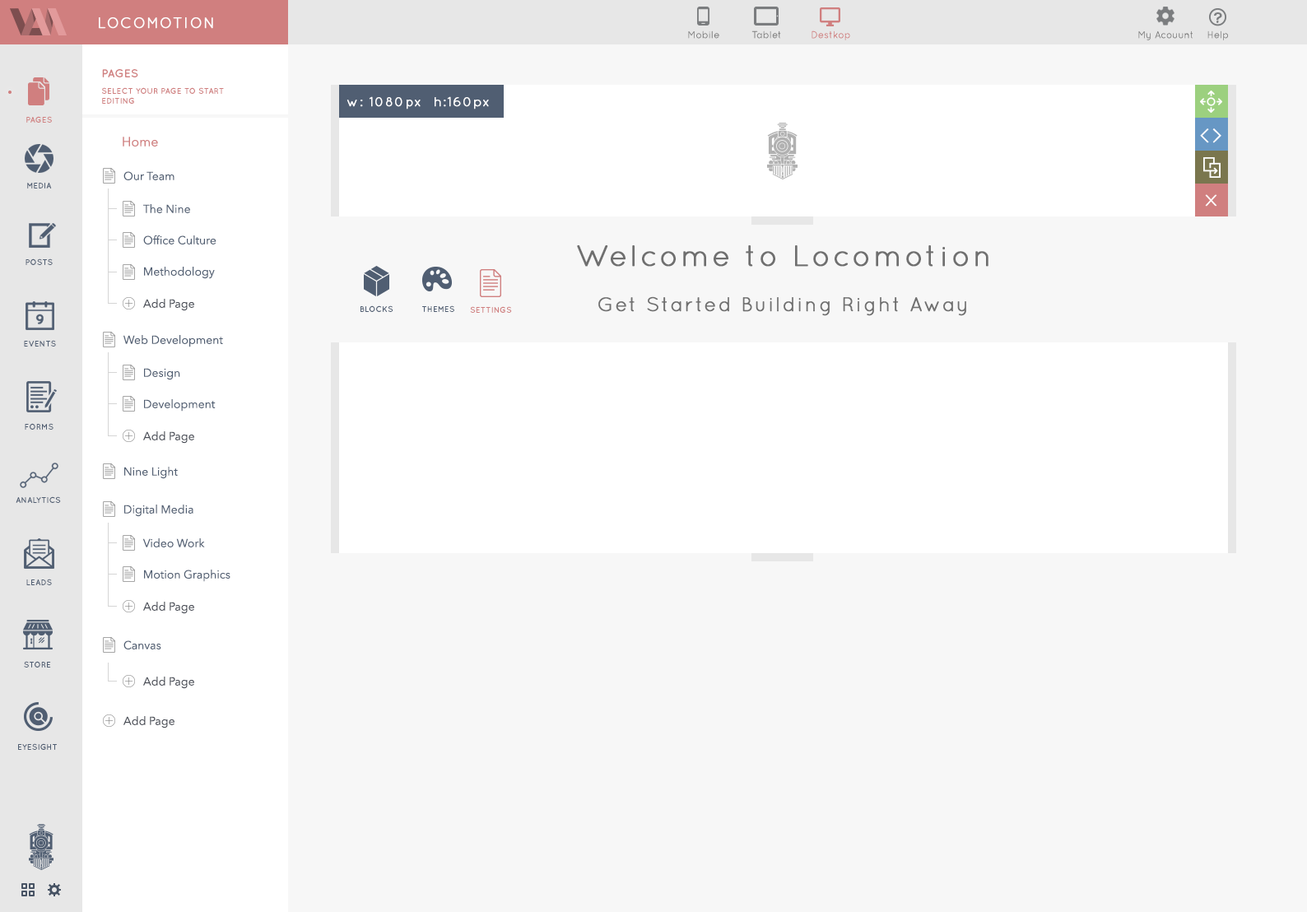
<style>
.page{position:relative;width:1307px;height:912px;background:#f7f7f7}
.page>*{position:absolute;margin:0}
.t1{font:14.8px "Quicksand-Regular";letter-spacing:0.07em;color:#ffffff;font-weight:bold}
.t2{font:9.9px "Quicksand-Regular";color:#797979}
.t3{font:9.9px "Quicksand-Regular";color:#d07f7f}
.t4{font:11.5px "Quicksand-Bold";color:#d07f7f;text-transform:uppercase}
.t5{font:8.2px/9.9px "Quicksand-Bold";color:#d07f7f;text-transform:uppercase}
.t6{font:13px "Quicksand-Regular";letter-spacing:0.07em;color:#ffffff;font-weight:bold}
.t7{font:8.2px "Quicksand-Bold";color:#d07f7f;text-transform:uppercase}
.t8{font:13.2px "AvenirNext-Regular";color:#d07f7f}
.t9{font:18.5px "EuphemiaUCAS";letter-spacing:0.12em;color:#ffffff;text-transform:uppercase;scale:1.12 1}
.t10{font:11.5px "AvenirNext-Regular";color:#505e72}
.t11{font:8.2px "Quicksand-Bold";color:#505e72;text-transform:uppercase}
.t12{font:15.6px "Quicksand-Regular";letter-spacing:0.07em;color:#ffffff;font-weight:bold;scale:1.27 1}
.t13{font:29.6px "Quicksand-Regular";letter-spacing:0.07em;color:#6f6f6f;font-weight:bold}
.t14{font:11.5px "AvenirNext-Regular";color:#4a4e57}
.t15{font:19.8px "Quicksand-Regular";letter-spacing:0.07em;color:#6f6f6f;font-weight:bold}
</style>
<div class="page">
<p class="t1" style="left:99px;top:17px;width:114px;height:12px">LOCOMOTION</p>
<p class="t2" style="left:688px;top:30px;width:32px;height:9px">Mobile</p>
<p class="t2" style="left:752px;top:30px;width:29px;height:9px">Tablet</p>
<p class="t3" style="left:812px;top:30px;width:38px;height:10px">Destkop</p>
<p class="t2" style="left:1139px;top:30px;width:54px;height:10px">My Acouunt</p>
<p class="t2" style="left:1208px;top:30px;width:20px;height:10px">Help</p>
<p class="t4" style="left:102px;top:69px;width:36px;height:8px">PAGES</p>
<p class="t5" style="left:102px;top:87px;width:122px;height:17px">SELECT YOUR PAGE TO START<br>EDITING</p>
<p class="t6" style="left:347px;top:96px;width:142px;height:13px">w: 1080px  h:160px</p>
<p class="t7" style="left:26px;top:116px;width:26px;height:7px">pages</p>
<p class="t8" style="left:123px;top:137px;width:35px;height:10px">Home</p>
<p class="t9" style="left:1200px;top:128px;width:22px;height:15px">&lt;&gt;</p>
<p class="t10" style="left:123px;top:171px;width:52px;height:9px">Our Team</p>
<p class="t11" style="left:27px;top:183px;width:25px;height:6px">MEDIA</p>
<p class="t12" style="left:1205px;top:194px;width:13px;height:13px">X</p>
<p class="t10" style="left:143px;top:204px;width:47px;height:9px">The Nine</p>
<p class="t10" style="left:143px;top:235px;width:74px;height:9px">Office Culture</p>
<p class="t13" style="left:577px;top:245px;width:412px;height:22px">Welcome to Locomotion</p>
<p class="t11" style="left:26px;top:258px;width:27px;height:7px">POSTS</p>
<p class="t10" style="left:144px;top:267px;width:71px;height:12px">Methodology</p>
<p class="t14" style="left:143px;top:299px;width:51px;height:12px">Add Page</p>
<p class="t11" style="left:361px;top:305px;width:33px;height:7px">BLOCKS</p>
<p class="t11" style="left:422px;top:305px;width:32px;height:7px">THEMES</p>
<p class="t15" style="left:598px;top:296px;width:368px;height:20px">Get Started Building Right Away</p>
<p class="t7" style="left:470px;top:306px;width:42px;height:7px">SETTINGS</p>
<p class="t11" style="left:24px;top:340px;width:32px;height:7px">EVENTS</p>
<p class="t10" style="left:123px;top:335px;width:100px;height:12px">Web Development</p>
<p class="t10" style="left:144px;top:368px;width:36px;height:12px">Design</p>
<p class="t10" style="left:144px;top:399px;width:72px;height:13px">Development</p>
<p class="t11" style="left:25px;top:423px;width:29px;height:7px">FORMS</p>
<p class="t14" style="left:143px;top:431px;width:51px;height:13px">Add Page</p>
<p class="t10" style="left:124px;top:467px;width:54px;height:12px">Nine Light</p>
<p class="t11" style="left:16px;top:496px;width:45px;height:7px">ANALYTICS</p>
<p class="t10" style="left:124px;top:505px;width:69px;height:12px">Digital Media</p>
<p class="t10" style="left:142px;top:538px;width:63px;height:9px">Video Work</p>
<p class="t10" style="left:144px;top:570px;width:87px;height:12px">Motion Graphics</p>
<p class="t11" style="left:26px;top:579px;width:26px;height:6px">LEADS</p>
<p class="t14" style="left:143px;top:602px;width:51px;height:12px">Add Page</p>
<p class="t10" style="left:123px;top:640px;width:38px;height:10px">Canvas</p>
<p class="t11" style="left:24px;top:661px;width:27px;height:7px">STORE</p>
<p class="t14" style="left:143px;top:677px;width:51px;height:12px">Add Page</p>
<p class="t14" style="left:123px;top:716px;width:52px;height:13px">Add Page</p>
<p class="t11" style="left:18px;top:743px;width:39px;height:7px">EYESIGHT</p>
</div>
